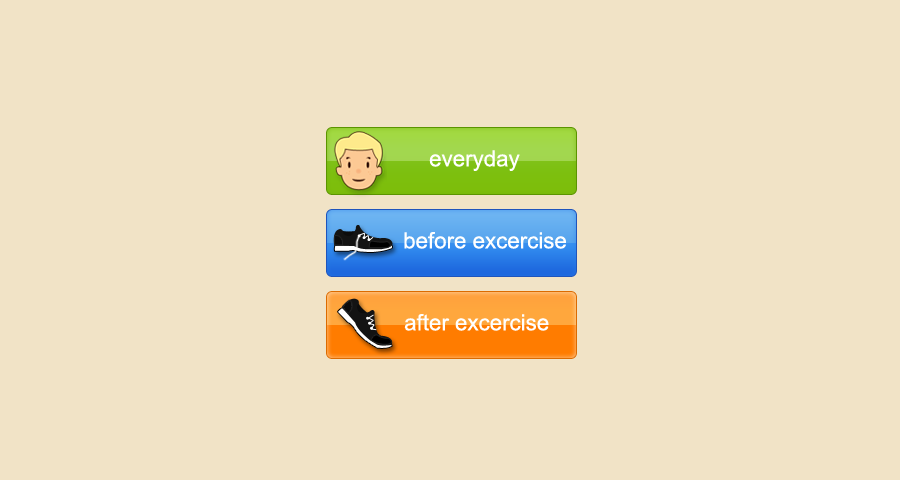
<style>
.page{position:relative;width:900px;height:480px;background:#f1e3c6}
.page>*{position:absolute;margin:0}
.t1{font:22.3px "ArialMT";color:#ffffff}
</style>
<div class="page">
<p class="t1" style="left:429px;top:150px;width:91px;height:21px">everyday</p>
<p class="t1" style="left:404px;top:232px;width:162px;height:17px">before excercise</p>
<p class="t1" style="left:404px;top:314px;width:145px;height:17px">after excercise</p>
</div>
